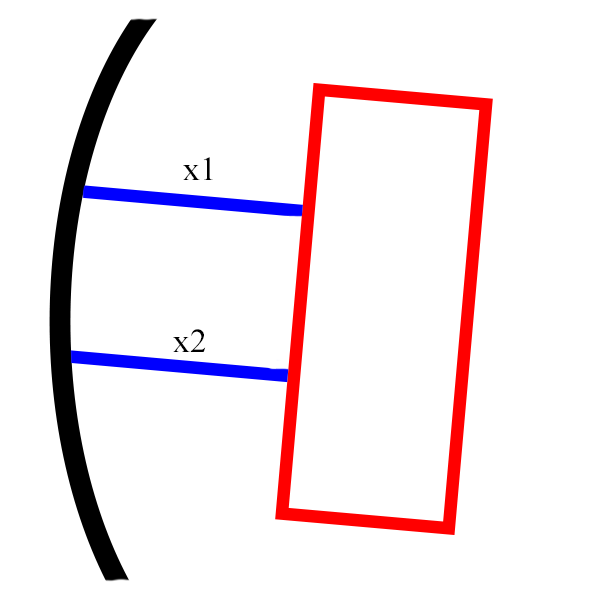
<style>
.page{position:relative;width:600px;height:600px;background:#ffffff}
.page>*{position:absolute;margin:0}
.t1{font:33.3px "TimesNewRomanPSMT";color:#000000}
</style>
<div class="page">
<p class="t1" style="left:183px;top:157px;width:30px;height:23px">x1</p>
<p class="t1" style="left:173px;top:329px;width:33px;height:23px">x2</p>
</div>
